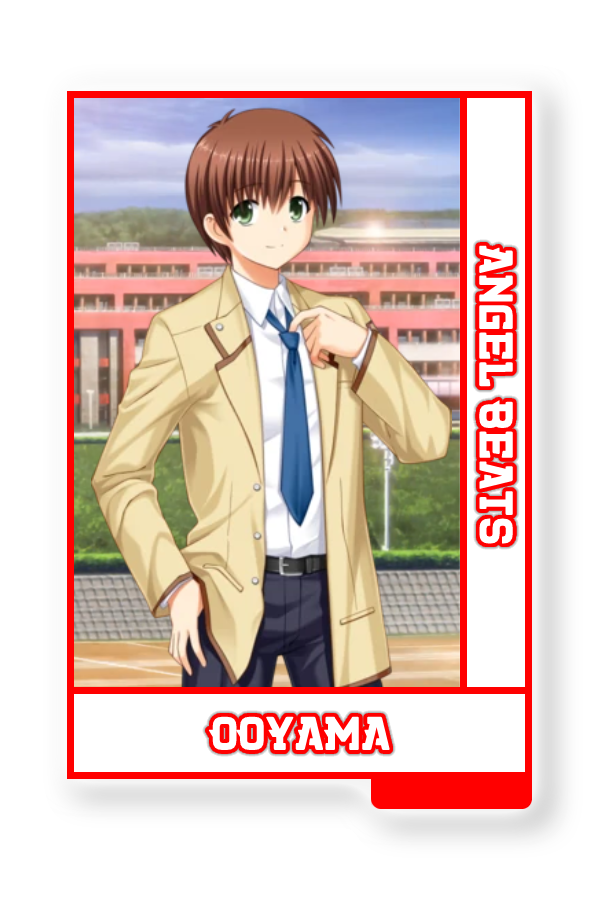
<style>
.page{position:relative;width:600px;height:900px;background:#ffffff}
.page>*{position:absolute;margin:0}
.t1{font:48.8px "KillerCollege";color:#ffffff}
.t2{font:48.6px "KillerCollege";color:#ffffff}
</style>
<div class="page">
<p class="t1" style="left:479px;top:245px;width:34px;height:299px;rotate:90deg">Angel Beats</p>
<p class="t2" style="left:208px;top:716px;width:182px;height:35px">OOYAMA</p>
</div>
